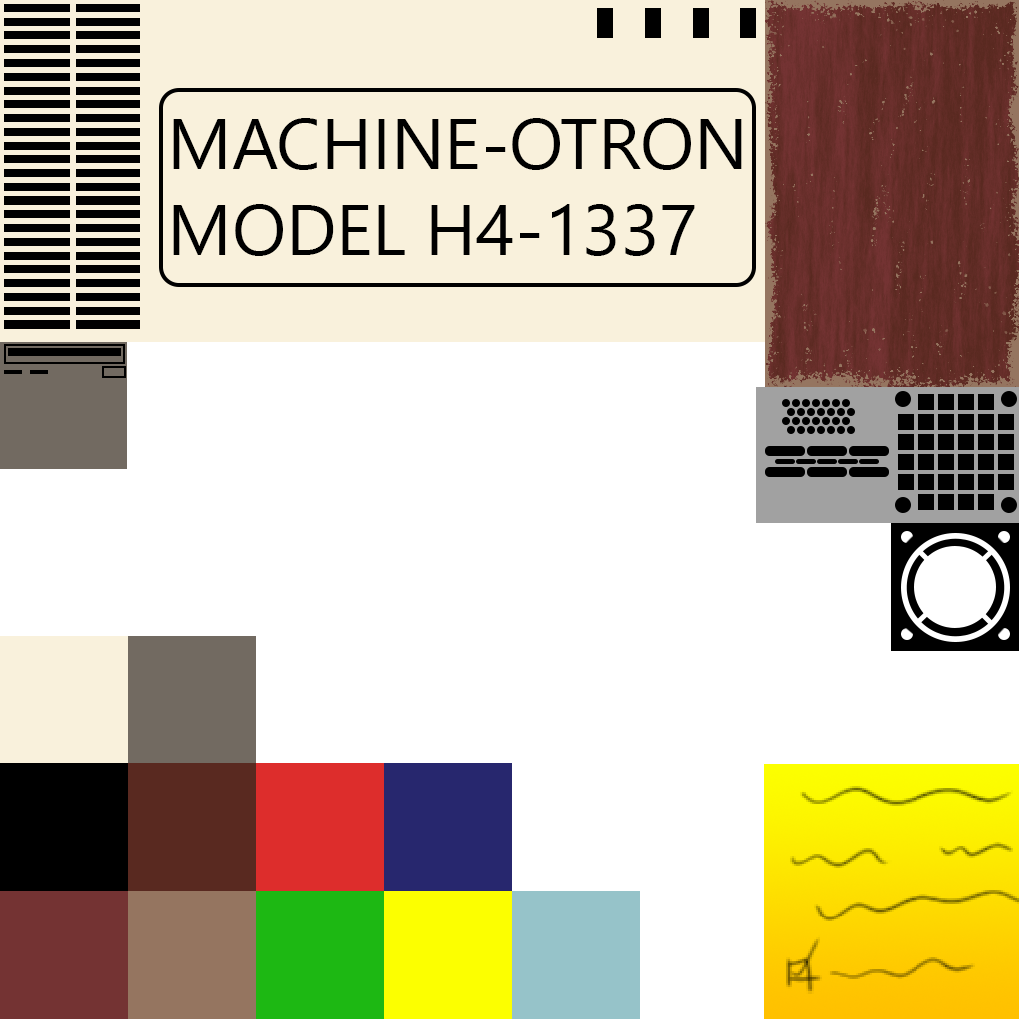
<style>
.page{position:relative;width:1019px;height:1019px;background:#ffffff}
.page>*{position:absolute;margin:0}
.t1{font:71.6px "SegoeUI";color:#000000}
</style>
<div class="page">
<p class="t1" style="left:173px;top:118px;width:569px;height:138px">MACHINE-OTRON<br>MODEL H4-1337</p>
</div>
